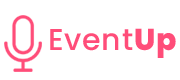
<style>
.page{position:relative;width:180px;height:80px;background:#ffffff}
.page>*{position:absolute;margin:0}
.t1{font:30px "Poppins-Medium";letter-spacing:0.025em;color:#ff4d79}
.t2{font:30px "Poppins-ExtraBold";letter-spacing:0.025em;color:#ff4d79}
</style>
<div class="page">
<p class="t1" style="left:50px;top:28px;width:126px;height:30px">Event<span class="t2">Up</span></p>
</div>
